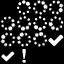
<style>
.page{position:relative;width:64px;height:64px;background:#000000}
.page>*{position:absolute;margin:0}
.t1{font:19.6px "TimesNewRomanPSMT";color:#ffffff;font-weight:bold;scale:1.15 1}
</style>
<div class="page">
<p class="t1" style="left:22px;top:49px;width:4px;height:14px">!</p>
</div>
